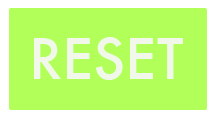
<style>
.page{position:relative;width:216px;height:117px;background:#b2ff59}
.page>*{position:absolute;margin:0}
.t1{font:55.3px "Futura-Medium";color:#f1f8e9}
</style>
<div class="page">
<p class="t1" style="left:34px;top:37px;width:149px;height:43px">RESET</p>
</div>
